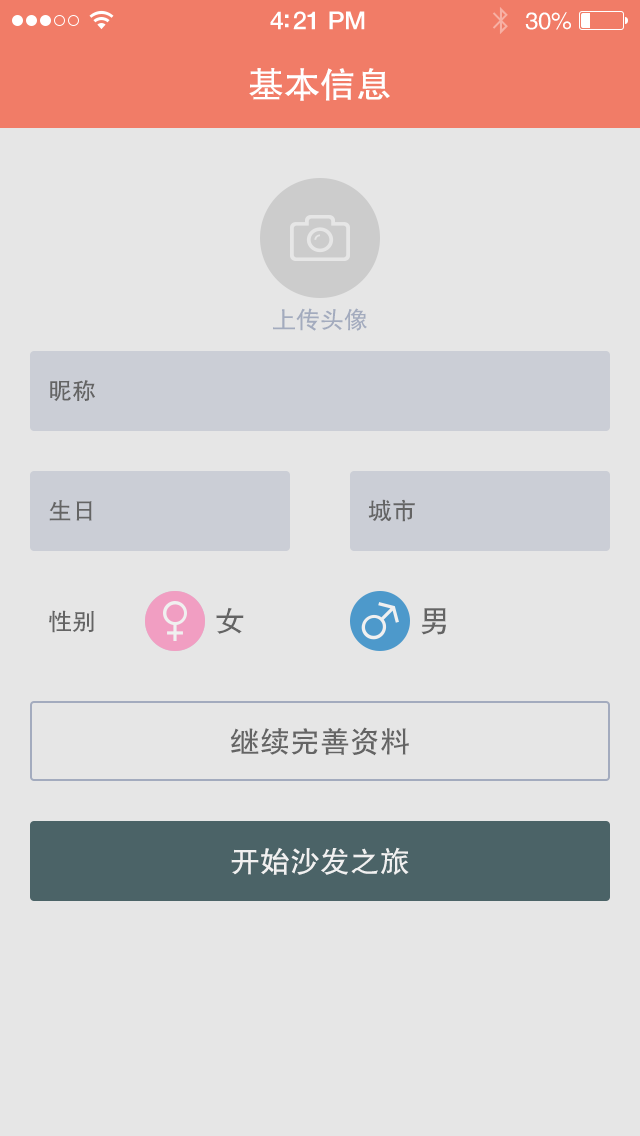
<style>
.page{position:relative;width:640px;height:1136px;background:#e6e6e6}
.page>*{position:absolute;margin:0}
.t1{font:25px "HelveticaNeue-Medium";letter-spacing:-0.02em;color:#ffffff}
.t2{font:24px "FZHTJW--GB1-0";letter-spacing:-0.02em;color:#ffffff}
.t3{font:36px "FZHTJW--GB1-0";color:#ffffff}
.t4{font:24px "FZHTJW--GB1-0";color:#a3abbe}
.t5{font:24px "FZHTJW--GB1-0";color:#646464}
.t6{font:30px "FZHTJW--GB1-0";color:#646464}
.t7{font:30px "FZHTJW--GB1-0";color:#f0f0f0}
</style>
<div class="page">
<p class="t1" style="left:270px;top:11px;width:95px;height:19px">4:21 PM</p>
<p class="t2" style="left:525px;top:12px;width:46px;height:18px">30%</p>
<p class="t3" style="left:249px;top:68px;width:141px;height:33px">基本信息</p>
<p class="t4" style="left:273px;top:308px;width:94px;height:23px">上传头像</p>
<p class="t5" style="left:50px;top:380px;width:45px;height:21px">昵称</p>
<p class="t5" style="left:49px;top:500px;width:43px;height:21px">生日</p>
<p class="t5" style="left:368px;top:499px;width:47px;height:23px">城市</p>
<p class="t5" style="left:49px;top:610px;width:45px;height:23px">性别</p>
<p class="t6" style="left:216px;top:607px;width:28px;height:27px">女</p>
<p class="t6" style="left:421px;top:608px;width:25px;height:27px">男</p>
<p class="t6" style="left:230px;top:727px;width:179px;height:29px">继续完善资料</p>
<p class="t7" style="left:231px;top:847px;width:178px;height:28px">开始沙发之旅</p>
</div>
